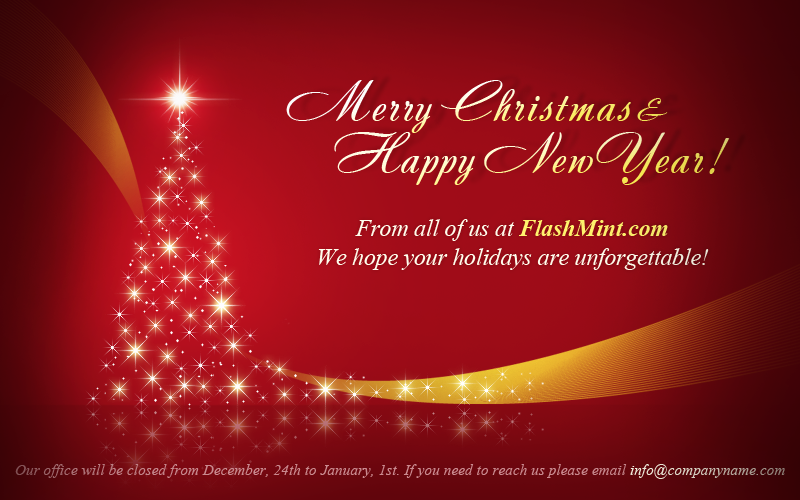
<style>
.page{position:relative;width:800px;height:500px}
.page>*{position:absolute;margin:0}
.t1{font:55px "Andantinoscript";letter-spacing:0.025em}
.t2{font:30px "Andantinoscript";letter-spacing:0.025em}
.t3{font:24px "TimesNewRomanPS-ItalicMT";letter-spacing:-0.01em;color:#fffeed}
.t4{font:24px "TimesNewRomanPS-BoldItalicMT";letter-spacing:-0.01em;color:#fff36d}
.t5{font:15px "TimesNewRomanPS-ItalicMT";letter-spacing:0.01em;color:#ca8b90}
.t6{font:15px "TimesNewRomanPS-ItalicMT";letter-spacing:0.01em;color:#fffeec}
</style>
<div class="page">
<p class="t1" style="left:286px;top:80px;width:382px;height:53px">Merry Christmas <span class="t2">&amp;</span></p>
<p class="t1" style="left:334px;top:132px;width:396px;height:53px">Happy NewYear!</p>
<p class="t3" style="left:355px;top:219px;width:313px;height:22px">From all of us at <span class="t4">FlashMint.com</span></p>
<p class="t3" style="left:318px;top:248px;width:391px;height:22px">We hope your holidays are unforgettable!</p>
<p class="t5" style="left:15px;top:464px;width:770px;height:15px">Our office will be closed from December, 24th to January, 1st. If you need to reach us please email<span class="t6"> info@companyname.com</span></p>
</div>
